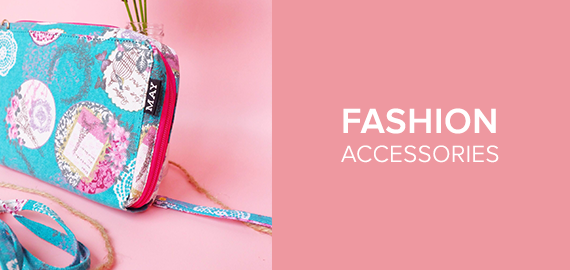
<style>
.page{position:relative;width:570px;height:270px;background:#ee98a0}
.page>*{position:absolute;margin:0}
.t1{font:24px "ProximaNovaLight";letter-spacing:0.02em;color:#ffffff}
.t2{font:36px "ProximaNova-Semibold";letter-spacing:0.02em;color:#ffffff}
</style>
<div class="page">
<p class="t1" style="left:341px;top:108px;width:158px;height:55px"><span class="t2">FASHION<br></span>ACCESSORIES</p>
</div>
